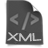
<style>
.page{position:relative;width:48px;height:48px;background:#ffffff}
.page>*{position:absolute;margin:0}
.t1{font:10.8px "PirulenRg-Regular";color:#c2c2c2}
</style>
<div class="page">
<p class="t1" style="left:7px;top:32px;width:35px;height:10px">XML</p>
</div>
